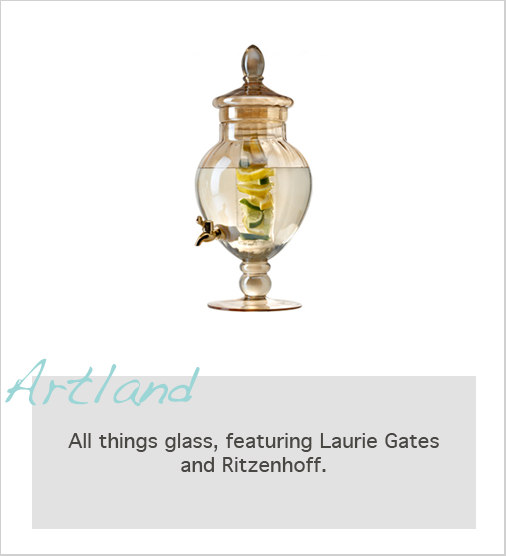
<style>
.page{position:relative;width:506px;height:556px;background:#ffffff}
.page>*{position:absolute;margin:0}
.t1{font:56px "Handwriting-Dakota";color:#9bd5d5}
.t2{font:20px "Geneva";color:#484743}
</style>
<div class="page">
<p class="t1" style="left:5px;top:358px;width:195px;height:49px">Artland</p>
<p class="t2" style="left:68px;top:433px;width:371px;height:39px;text-align:center">All things glass, featuring Laurie Gates and Ritzenhoff.</p>
</div>
